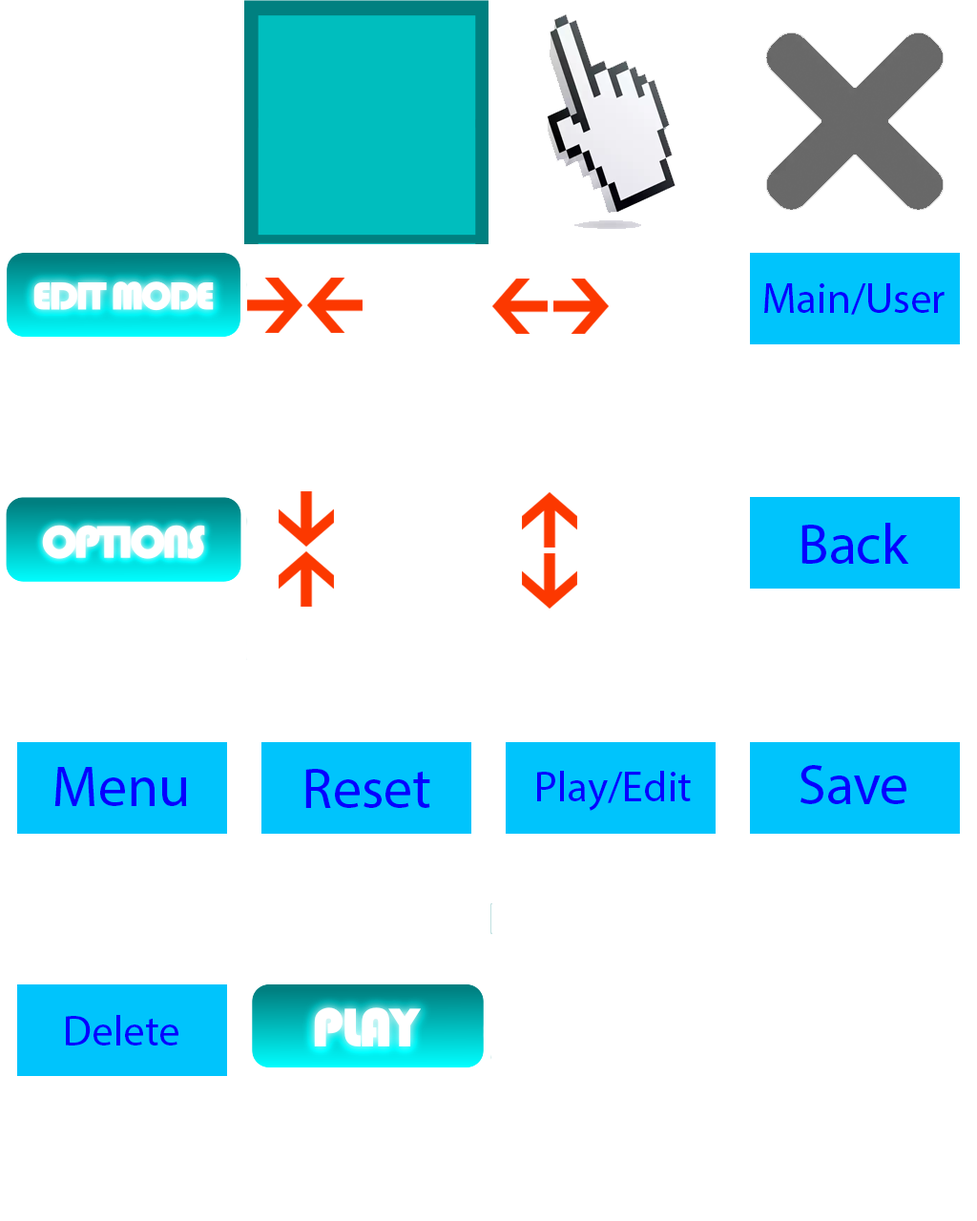
<style>
.page{position:relative;width:977px;height:1221px;background:#ffffff}
.page>*{position:absolute;margin:0}
.t1{font:42.9px "MyriadPro-Regular";color:#0600ff}
.t2{font:57.2px "MyriadPro-Regular";color:#0600ff}
</style>
<div class="page">
<p class="t1" style="left:764px;top:283px;width:180px;height:32px">Main/User</p>
<p class="t2" style="left:801px;top:523px;width:108px;height:41px">Back</p>
<p class="t2" style="left:54px;top:767px;width:133px;height:39px">Menu</p>
<p class="t2" style="left:305px;top:769px;width:125px;height:39px">Reset</p>
<p class="t1" style="left:537px;top:771px;width:154px;height:40px">Play/Edit</p>
<p class="t2" style="left:800px;top:765px;width:106px;height:39px">Save</p>
<p class="t1" style="left:66px;top:1015px;width:112px;height:30px">Delete</p>
</div>
